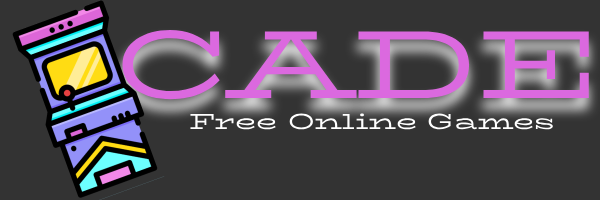
<style>
.page{position:relative;width:600px;height:200px;background:#333333}
.page>*{position:absolute;margin:0}
.t1{font:97px "BioRhymeExpanded-Regular";color:#db69df}
.t2{font:97px "BioRhymeExpanded-Regular";color:#ffc000}
.t3{font:22px "BioRhymeExpanded-Regular";color:#ffffff}
</style>
<div class="page">
<p class="t1" style="left:122px;top:30px;width:467px;height:70px"><span class="t2">  </span>CADE</p>
<p class="t3" style="left:190px;top:113px;width:363px;height:17px">Free Online Games</p>
</div>
